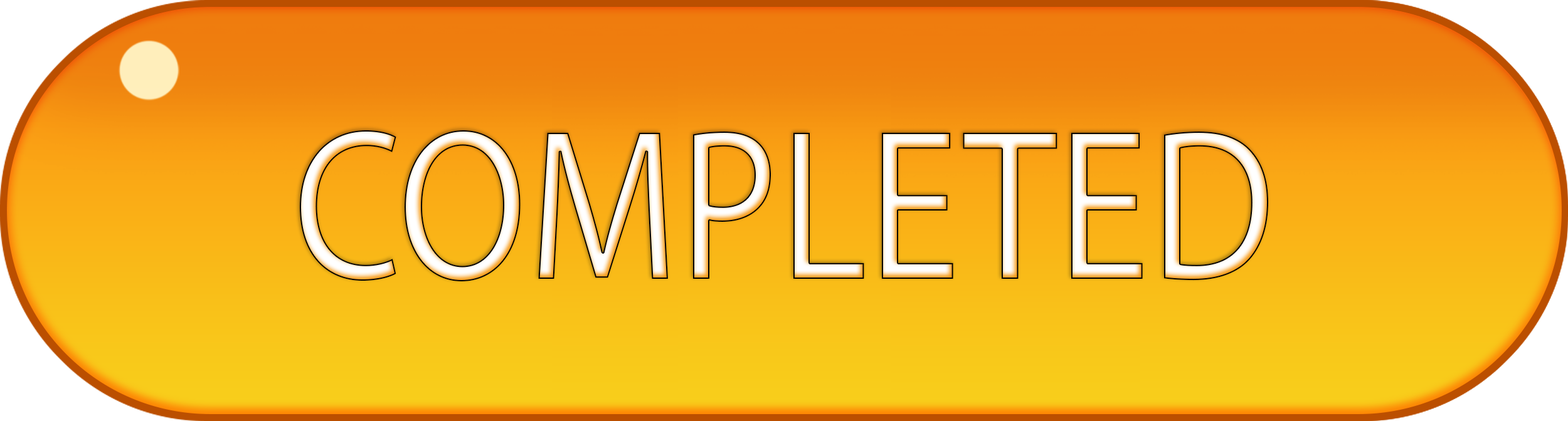
<style>
.page{position:relative;width:1568px;height:421px}
.page>*{position:absolute;margin:0}
.t1{font:216.4px "MyriadPro-Regular";scale:0.87 1}
</style>
<div class="page">
<p class="t1" style="left:300px;top:130px;width:968px;height:152px">COMPLETED</p>
</div>
